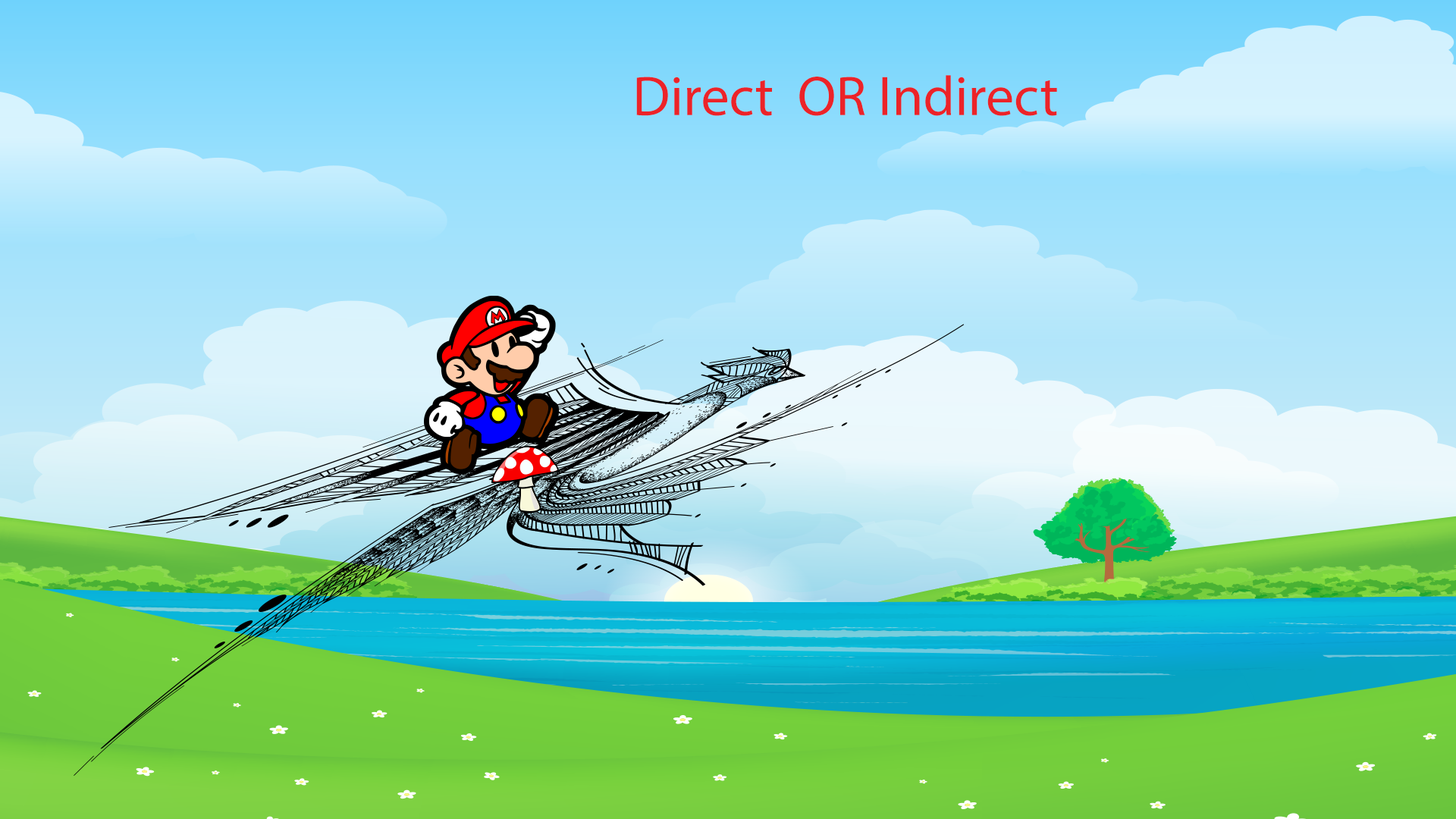
<style>
.page{position:relative;width:1456px;height:819px}
.page>*{position:absolute;margin:0}
.t1{font:56.1px "MyriadPro-Regular";color:#ec2328}
</style>
<div class="page">
<p class="t1" style="left:636px;top:75px;width:421px;height:41px">Direct  OR Indirect</p>
</div>
